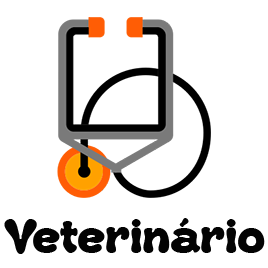
<style>
.page{position:relative;width:268px;height:268px;background:#ffffff}
.page>*{position:absolute;margin:0}
.t1{font:41.7px "Kush-Fat";color:#030303}
</style>
<div class="page">
<p class="t1" style="left:4px;top:218px;width:261px;height:36px">Veterinário</p>
</div>
